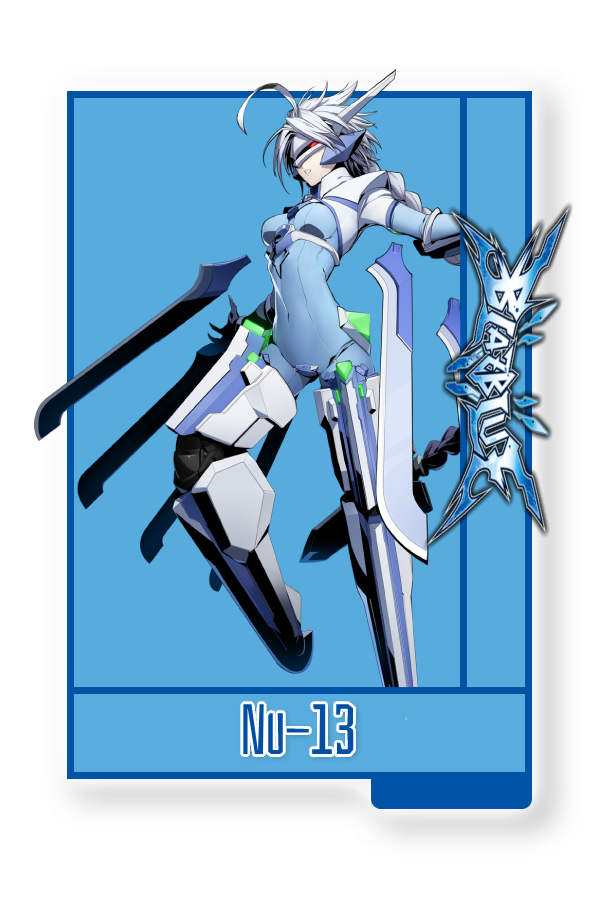
<style>
.page{position:relative;width:600px;height:900px;background:#58acdd}
.page>*{position:absolute;margin:0}
.t1{font:70px "Bahianita-Regular";color:#004fa2}
</style>
<div class="page">
<p class="t1" style="left:243px;top:704px;width:111px;height:50px">Nu-13</p>
</div>
